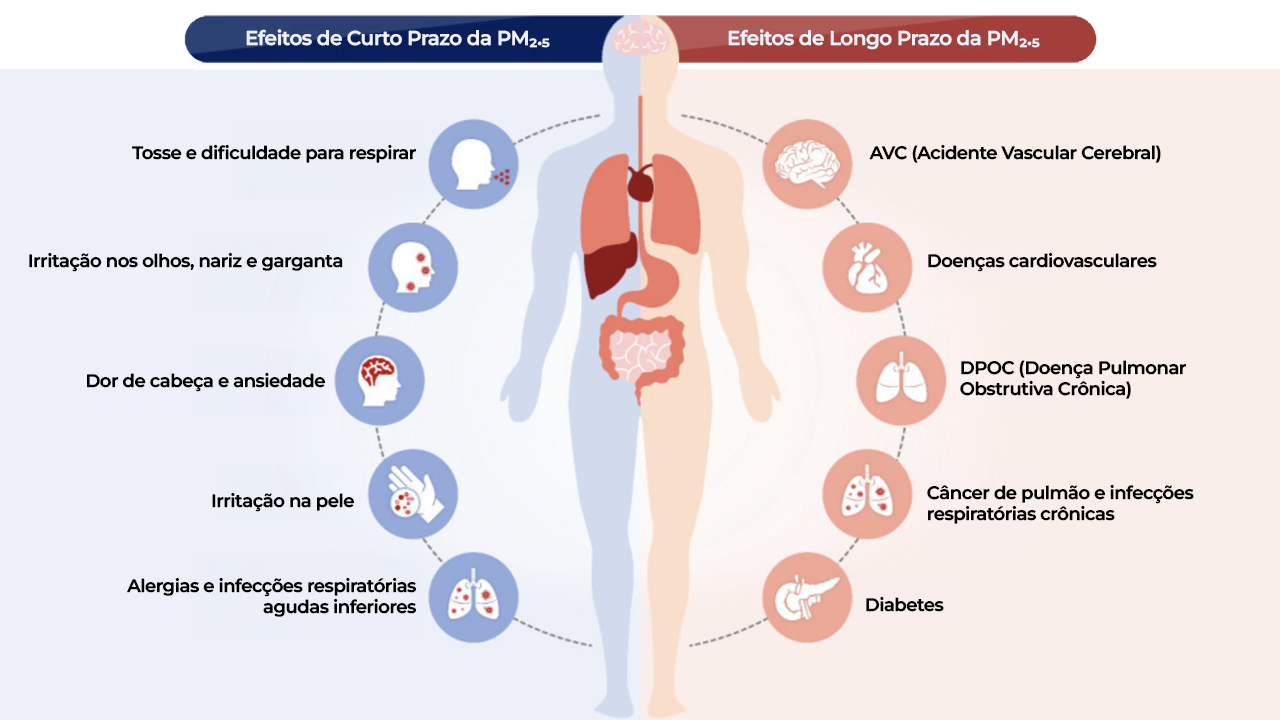
<style>
.page{position:relative;width:1280px;height:720px;background:#faeeeb}
.page>*{position:absolute;margin:0}
.t1{font:20px "MontserratRoman-SemiBold";letter-spacing:-0.025em;color:#edf0f8}
.t2{font:18px "MontserratRoman-SemiBold";letter-spacing:-0.025em;color:#000000}
</style>
<div class="page">
<p class="t1" style="left:246px;top:29px;width:304px;height:19px">Efeitos de Curto Prazo da PM₂.₅</p>
<p class="t1" style="left:728px;top:29px;width:312px;height:21px">Efeitos de Longo Prazo da PM₂.₅</p>
<p class="t2" style="left:132px;top:144px;width:284px;height:19px">Tosse e dificuldade para respirar</p>
<p class="t2" style="left:869px;top:144px;width:292px;height:19px">AVC (Acidente Vascular Cerebral)</p>
<p class="t2" style="left:29px;top:252px;width:314px;height:20px">Irritação nos olhos, nariz e garganta</p>
<p class="t2" style="left:928px;top:252px;width:229px;height:20px">Doenças cardiovasculares</p>
<p class="t2" style="left:960px;top:360px;width:226px;height:39px">DPOC (Doença Pulmonar Obstrutiva Crônica)</p>
<p class="t2" style="left:87px;top:372px;width:238px;height:20px">Dor de cabeça e ansiedade</p>
<p class="t2" style="left:927px;top:484px;width:267px;height:40px">Câncer de pulmão e infecções respiratórias crônicas</p>
<p class="t2" style="left:212px;top:492px;width:142px;height:20px">Irritação na pele</p>
<p class="t2" style="left:127px;top:577px;width:289px;height:40px;text-align:right">Alergias e infecções respiratórias agudas inferiores</p>
<p class="t2" style="left:866px;top:596px;width:78px;height:16px">Diabetes</p>
</div>
